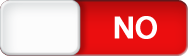
<style>
.page{position:relative;width:188px;height:56px}
.page>*{position:absolute;margin:0}
.t1{font:30px "HelveticaNeue-Medium";letter-spacing:-0.025em;color:#ffffff;font-weight:bold}
</style>
<div class="page">
<p class="t1" style="left:114px;top:16px;width:43px;height:23px">NO</p>
</div>
